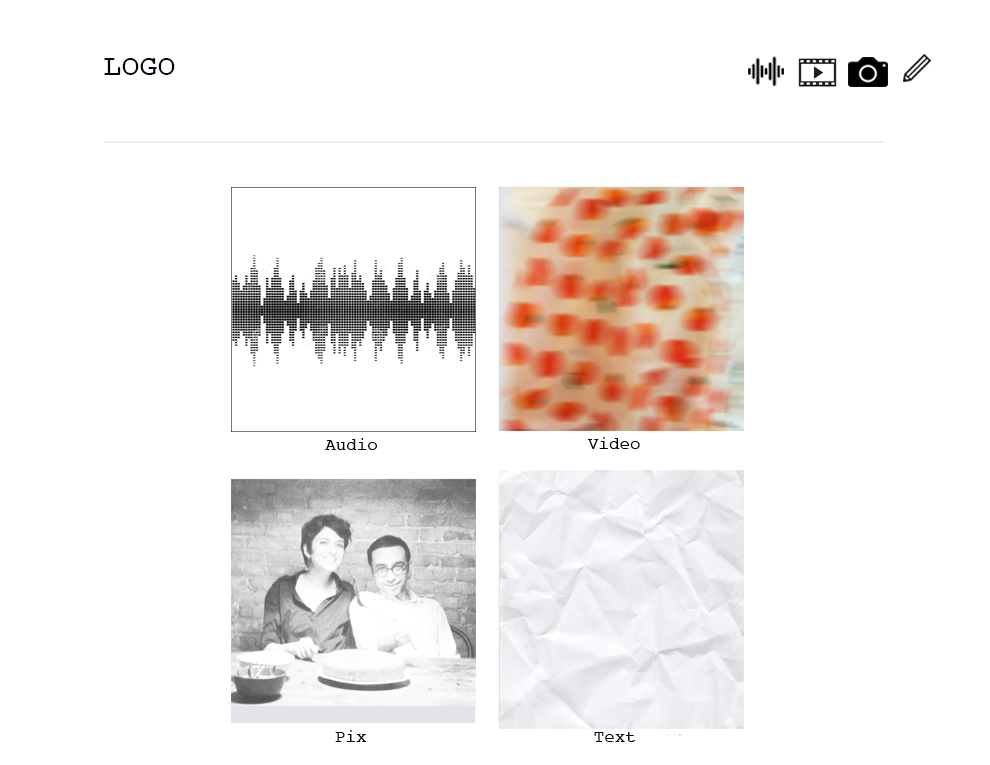
<style>
.page{position:relative;width:990px;height:765px;background:#ffffff}
.page>*{position:absolute;margin:0}
.t1{font:30px "Courier";color:#050312}
.t2{font:17.5px "Courier";color:#050312}
</style>
<div class="page">
<p class="t1" style="left:104px;top:58px;width:71px;height:17px">LOGO</p>
<p class="t2" style="left:325px;top:438px;width:52px;height:12px">Audio</p>
<p class="t2" style="left:588px;top:437px;width:52px;height:12px">Video</p>
<p class="t2" style="left:335px;top:730px;width:31px;height:12px">Pix</p>
<p class="t2" style="left:594px;top:732px;width:41px;height:10px">Text</p>
</div>
